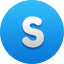
<style>
.page{position:relative;width:64px;height:64px}
.page>*{position:absolute;margin:0}
.t1{font:41px "FredokaOne-Regular"}
</style>
<div class="page">
<p class="t1" style="left:22px;top:16px;width:22px;height:32px">S</p>
</div>
